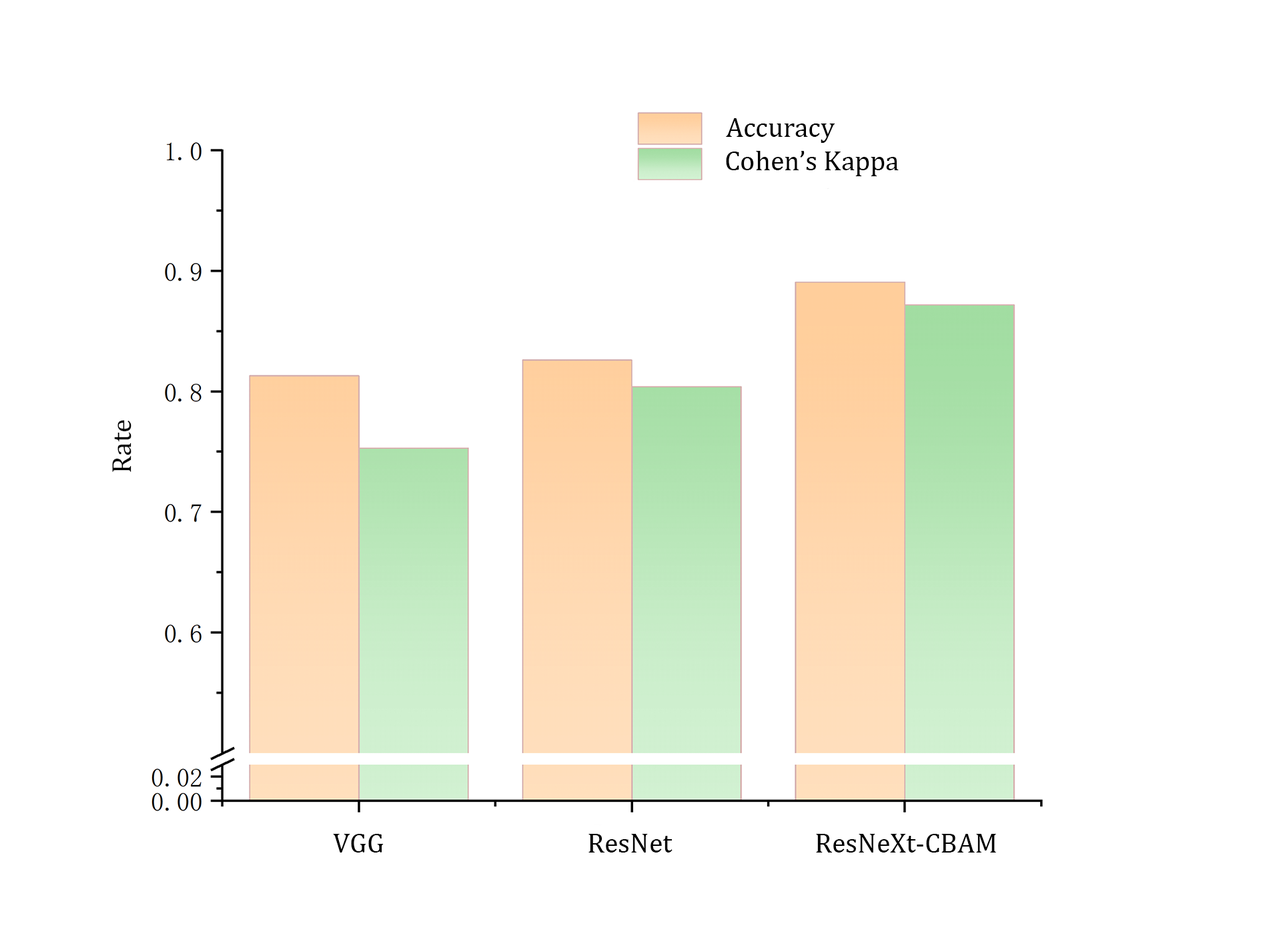
<style>
.page{position:relative;width:1261px;height:946px;background:#ffffff}
.page>*{position:absolute;margin:0}
.t1{font:27.8px "CambriaMath";color:#000000}
</style>
<div class="page">
<p class="t1" style="left:726px;top:118px;width:109px;height:25px">Accuracy</p>
<p class="t1" style="left:726px;top:151px;width:173px;height:25px">Cohen’s Kappa</p>
<p class="t1" style="left:112px;top:420px;width:19px;height:52px;rotate:-90deg">Rate</p>
<p class="t1" style="left:333px;top:833px;width:51px;height:19px">VGG</p>
<p class="t1" style="left:589px;top:833px;width:84px;height:19px">ResNet</p>
<p class="t1" style="left:816px;top:833px;width:180px;height:19px">ResNeXt-CBAM</p>
</div>
